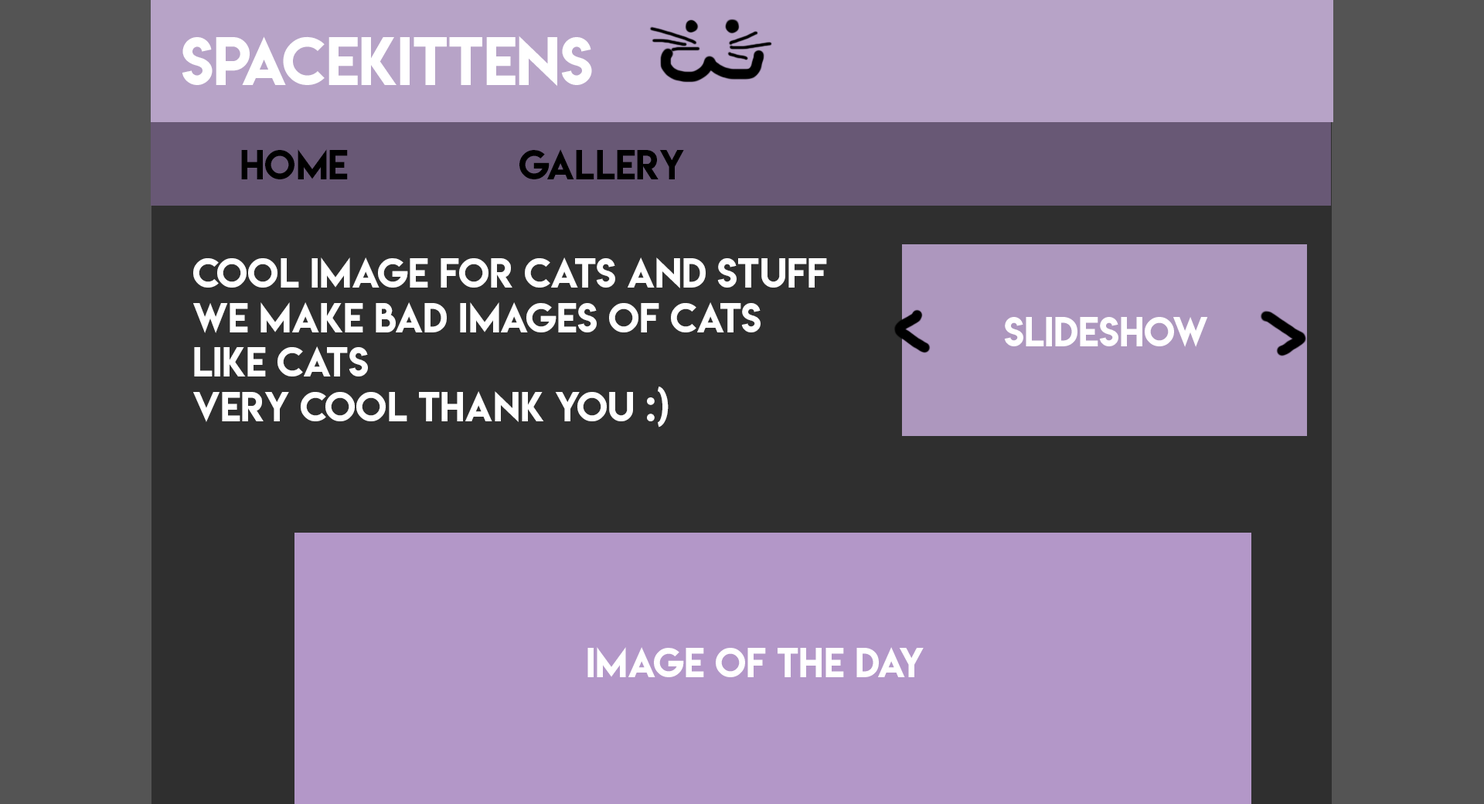
<style>
.page{position:relative;width:1484px;height:804px;background:#2f2f2f}
.page>*{position:absolute;margin:0}
.t1{font:60.3px "LemonMilk";color:#ffffff}
.t2{font:37.1px "LemonMilk";color:#000000}
.t3{font:37.1px "LemonMilk";color:#ffffff}
</style>
<div class="page">
<p class="t1" style="left:182px;top:36px;width:410px;height:51px">spacekittens</p>
<p class="t2" style="left:241px;top:149px;width:107px;height:30px">HOME</p>
<p class="t2" style="left:519px;top:149px;width:165px;height:30px">gallery</p>
<p class="t3" style="left:193px;top:257px;width:634px;height:170px">Cool image for cats and stuff<br>we make bad images of cats<br>like cats<br>very cool thank you :)</p>
<p class="t3" style="left:1004px;top:317px;width:204px;height:30px">slideshow</p>
<p class="t3" style="left:587px;top:647px;width:336px;height:30px">image of the day</p>
</div>
